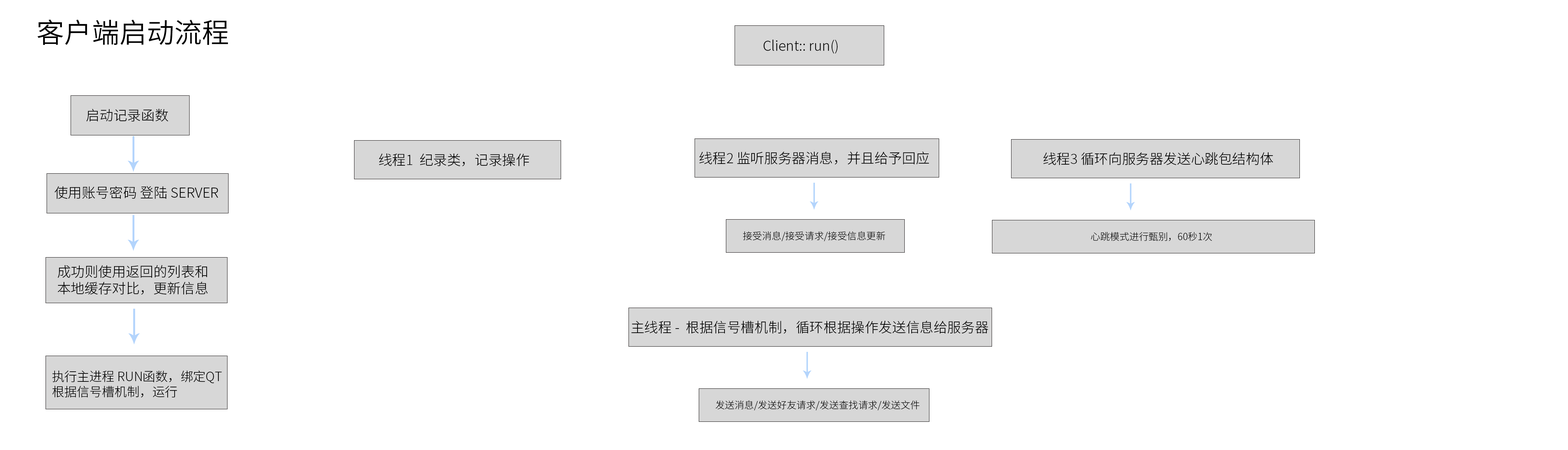
<style>
.page{position:relative;width:1568px;height:450px;background:#ffffff}
.page>*{position:absolute;margin:0}
.t1{font:27.6px "SourceHanSansCN-Normal";color:#000000}
.t2{font:13.8px "SourceHanSansCN-Light";color:#000000}
.t3{font:9.6px "SourceHanSansCN-Light";color:#000000}
.t4{font:12.6px "SourceHanSansCN-Light";color:#000000}
</style>
<div class="page">
<p class="t1" style="left:37px;top:19px;width:191px;height:26px">客户端启动流程</p>
<p class="t2" style="left:763px;top:39px;width:75px;height:15px">Client:: run()</p>
<p class="t2" style="left:86px;top:109px;width:82px;height:13px">启动记录函数</p>
<p class="t2" style="left:379px;top:153px;width:150px;height:13px">线程1  纪录类，记录操作</p>
<p class="t2" style="left:699px;top:151px;width:230px;height:14px">线程2 监听服务器消息，并且给予回应</p>
<p class="t2" style="left:1043px;top:152px;width:230px;height:13px">线程3 循环向服务器发送心跳包结构体</p>
<p class="t2" style="left:55px;top:186px;width:163px;height:13px">使用账号密码 登陆 SERVER</p>
<p class="t3" style="left:743px;top:231px;width:142px;height:10px">接受消息/接受请求/接受信息更新</p>
<p class="t3" style="left:1091px;top:232px;width:121px;height:9px">心跳模式进行甄别，60秒1次</p>
<p class="t2" style="left:58px;top:265px;width:150px;height:30px">成功则使用返回的列表和<br>本地缓存对比，更新信息</p>
<p class="t2" style="left:631px;top:320px;width:357px;height:14px">主线程 -  根据信号槽机制，循环根据操作发送信息给服务器</p>
<p class="t4" style="left:52px;top:370px;width:170px;height:28px">执行主进程 RUN函数，绑定QT<br>根据信号槽机制，运行</p>
<p class="t3" style="left:715px;top:400px;width:205px;height:10px">发送消息/发送好友请求/发送查找请求/发送文件</p>
</div>
